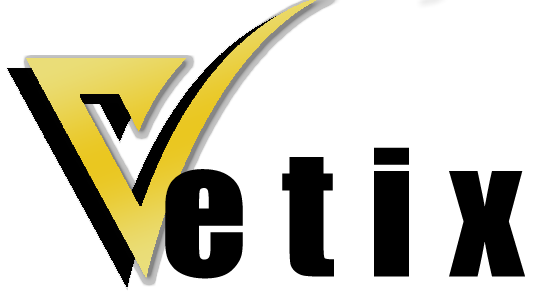
<style>
.page{position:relative;width:550px;height:295px;background:#ffffff}
.page>*{position:absolute;margin:0}
.t1{font:162.4px "Impact";letter-spacing:0.2em;color:#000000;scale:1.05 1}
</style>
<div class="page">
<p class="t1" style="left:165px;top:147px;width:360px;height:132px">etix</p>
</div>
